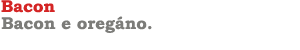
<style>
.page{position:relative;width:300px;height:50px;background:#ffffff}
.page>*{position:absolute;margin:0}
.t1{font:17px "BookmanOldStyle-Bold";color:#d42525}
.t2{font:17px "BookmanOldStyle-Bold";color:#7c7c79}
</style>
<div class="page">
<p class="t1" style="left:1px;top:0px;width:54px;height:13px">Bacon</p>
<p class="t2" style="left:1px;top:16px;width:151px;height:17px">Bacon e oregáno.</p>
</div>
